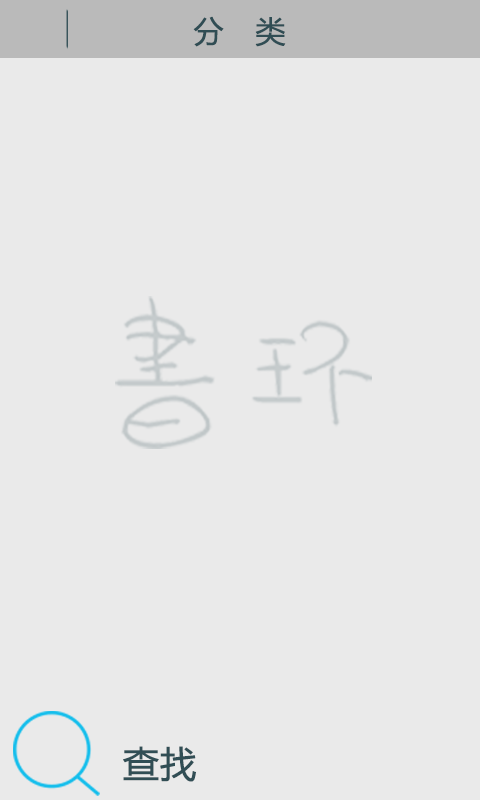
<style>
.page{position:relative;width:480px;height:800px;background:#eaeaea}
.page>*{position:absolute;margin:0}
.t1{font:30px "MicrosoftYaHei";color:#304d54;font-weight:bold}
.t2{font:36px "MicrosoftYaHei";color:#314e55;font-weight:bold}
</style>
<div class="page">
<p class="t1" style="left:193px;top:16px;width:93px;height:31px">分　类</p>
<p class="t2" style="left:123px;top:746px;width:73px;height:36px">查找</p>
</div>
